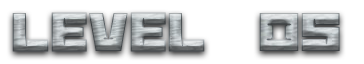
<style>
.page{position:relative;width:364px;height:64px;background:#ffffff}
.page>*{position:absolute;margin:0}
.t1{font:60px "BananaBrick"}
</style>
<div class="page">
<p class="t1" style="left:12px;top:12px;width:328px;height:40px">Level  05</p>
</div>
